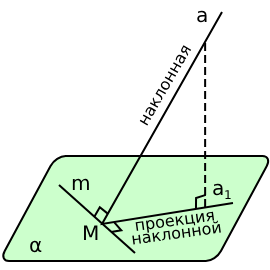
<style>
.page{position:relative;width:270px;height:270px;background:#ffffff}
.page>*{position:absolute;margin:0}
.t1{font:20px "DejaVuSans";color:#000000}
.t2{font:16px "DejaVuSans";color:#000000}
.t3{font:12px "DejaVuSans";color:#000000}
.t4{font:16px/13px "DejaVuSans";color:#000000}
</style>
<div class="page">
<p class="t1" style="left:197px;top:10px;width:10px;height:13px">a</p>
<p class="t2" style="left:139px;top:45px;width:53px;height:81px;rotate:-60deg">наклонная</p>
<p class="t1" style="left:72px;top:178px;width:17px;height:12px">m</p>
<p class="t1" style="left:213px;top:183px;width:10px;height:13px">a</p>
<p class="t3" style="left:225px;top:190px;width:6px;height:9px">1</p>
<p class="t4" style="left:132px;top:211px;width:89px;height:34px;text-align:center;rotate:-8deg">проекция<br>наклонной</p>
<p class="t1" style="left:84px;top:225px;width:14px;height:15px">M</p>
<p class="t1" style="left:30px;top:240px;width:12px;height:13px">α</p>
</div>
